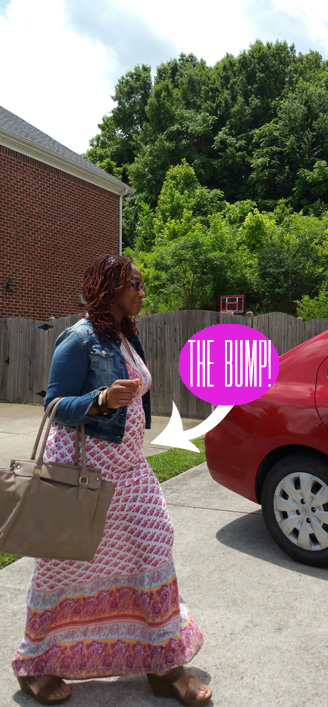
<style>
.page{position:relative;width:328px;height:707px}
.page>*{position:absolute;margin:0}
.t1{font:60px "CreditBlock";color:#ffffff}
</style>
<div class="page">
<p class="t1" style="left:188px;top:340px;width:83px;height:47px">the bump!</p>
</div>
